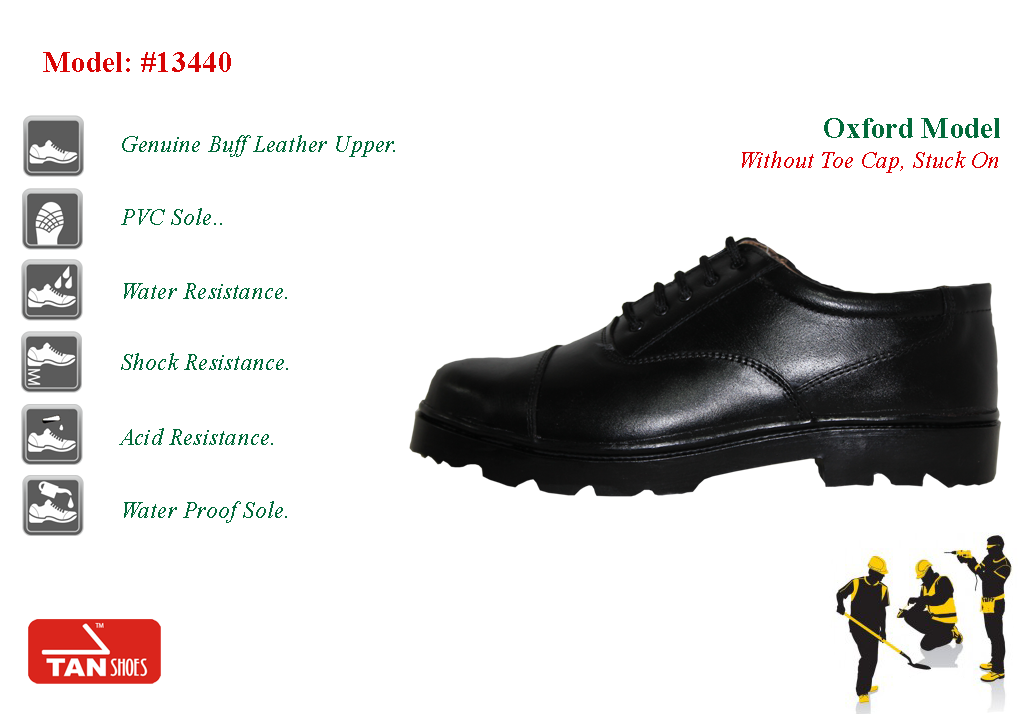
<style>
.page{position:relative;width:1024px;height:714px;background:#ffffff}
.page>*{position:absolute;margin:0}
.t1{font:30px "TimesNewRomanPS-BoldMT";letter-spacing:0.01em;color:#d80505;scale:0.95 1}
.t2{font:30px "TimesNewRomanPS-BoldMT";letter-spacing:0.01em;color:#026a3a;scale:0.95 1}
.t3{font:24px "TimesNewRomanPS-ItalicMT";letter-spacing:0.01em;color:#026a3a;scale:0.95 1}
.t4{font:24px "TimesNewRomanPS-ItalicMT";letter-spacing:0.01em;color:#dc0207;scale:0.95 1}
</style>
<div class="page">
<p class="t1" style="left:43px;top:52px;width:188px;height:20px">Model: #13440</p>
<p class="t2" style="left:824px;top:118px;width:176px;height:20px">Oxford Model</p>
<p class="t3" style="left:122px;top:135px;width:273px;height:22px">Genuine Buff Leather Upper.</p>
<p class="t4" style="left:742px;top:151px;width:256px;height:22px">Without Toe Cap, Stuck On</p>
<p class="t3" style="left:121px;top:208px;width:101px;height:17px">PVC Sole..</p>
<p class="t3" style="left:124px;top:283px;width:163px;height:16px">Water Resistance.</p>
<p class="t3" style="left:121px;top:353px;width:167px;height:17px">Shock Resistance.</p>
<p class="t3" style="left:119px;top:428px;width:154px;height:17px">Acid Resistance.</p>
<p class="t3" style="left:124px;top:501px;width:163px;height:22px">Water Proof Sole.</p>
</div>
